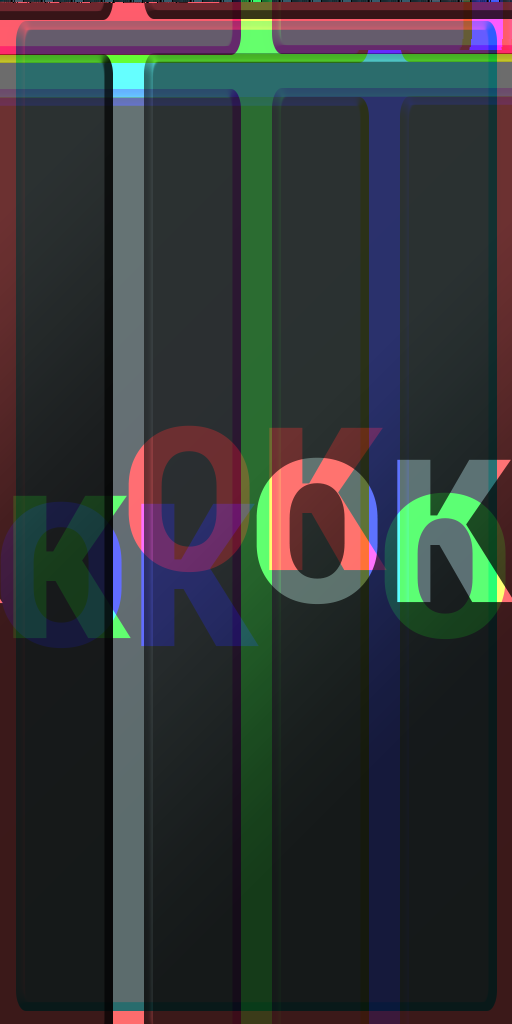
<style>
.page{position:relative;width:512px;height:1024px}
.page>*{position:absolute;margin:0}
.t1{font:200px "Roboto-Black"}
</style>
<div class="page">
<p class="t1" style="left:128px;top:423px;width:259px;height:148px">OK</p>
</div>
